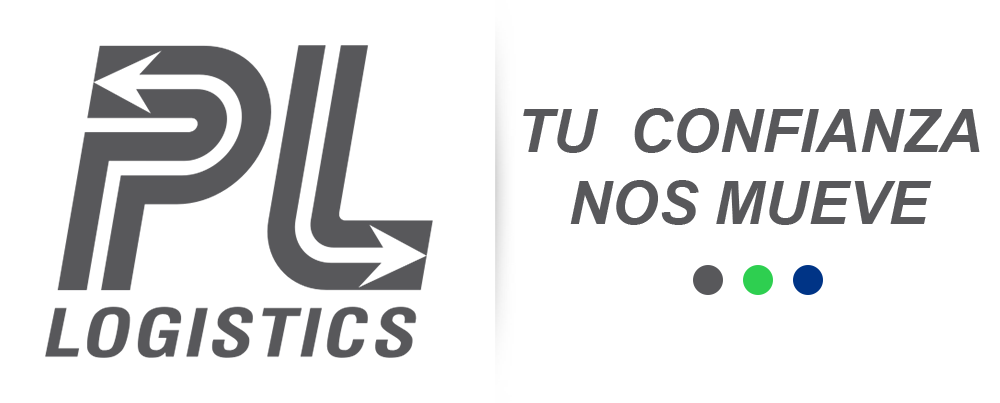
<style>
.page{position:relative;width:1000px;height:403px;background:#ffffff}
.page>*{position:absolute;margin:0}
.t1{font:60px "Arial-BoldItalicMT";color:#58585b}
</style>
<div class="page">
<p class="t1" style="left:523px;top:108px;width:457px;height:117px;text-align:center">TU  CONFIANZA<br>NOS MUEVE</p>
</div>
